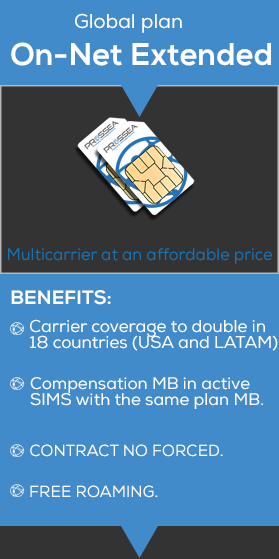
<style>
.page{position:relative;width:279px;height:559px;background:#428bca}
.page>*{position:absolute;margin:0}
.t1{font:20px "NexaRegular";color:#ffffff}
.t2{font:31.5px "Nexa-XBold";color:#ffffff}
.t3{font:16.6px "NexaRegular";color:#1873b5}
.t4{font:19.1px "Nexa-XBold";color:#ffffff}
.t5{font:17.1px/16.2px "NexaRegular";color:#ffffff}
.t6{font:16.7px/15.9px "NexaRegular";color:#ffffff}
.t7{font:16.2px "NexaRegular";color:#ffffff}
.t8{font:16.2px "Nexa-XBold";color:#ffffff}
</style>
<div class="page">
<p class="t1" style="left:75px;top:13px;width:107px;height:20px">Global plan</p>
<p class="t2" style="left:11px;top:42px;width:260px;height:24px">On-Net Extended</p>
<p class="t3" style="left:8px;top:248px;width:264px;height:16px">Multicarrier at an affordable price</p>
<p class="t4" style="left:11px;top:290px;width:100px;height:15px">BENEFITS:</p>
<p class="t5" style="left:30px;top:319px;width:248px;height:32px">Carrier coverage to double in<br> 18 countries (USA and LATAM)</p>
<p class="t6" style="left:30px;top:377px;width:233px;height:32px">Compensation MB in active<br>SIMS with the same plan MB.</p>
<p class="t7" style="left:30px;top:444px;width:193px;height:13px"><span class="t8">   <br></span>CONTRACT NO FORCED.</p>
<p class="t7" style="left:30px;top:485px;width:128px;height:13px">FREE ROAMING.</p>
</div>
